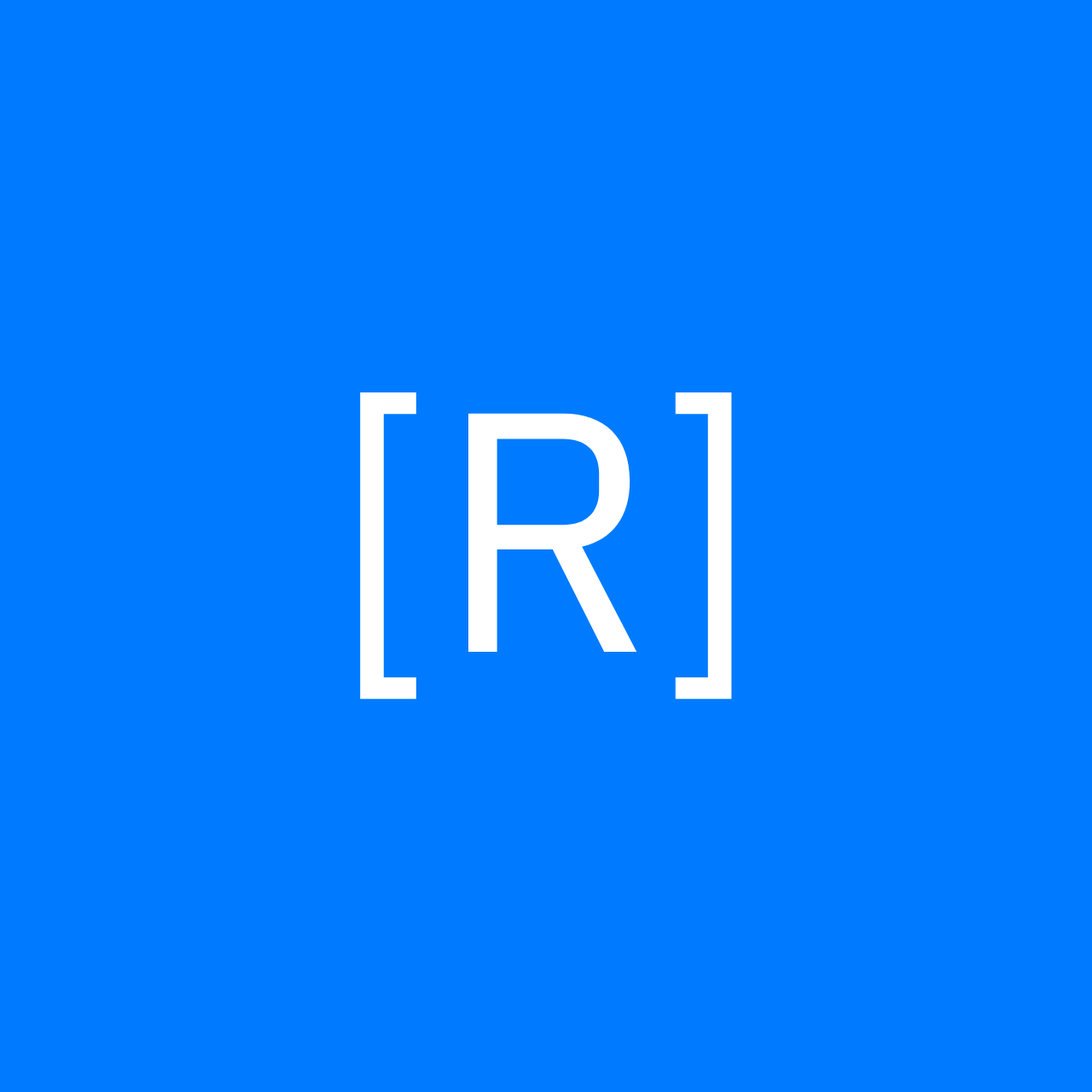
<style>
.page{position:relative;width:1092px;height:1092px;background:#007bff}
.page>*{position:absolute;margin:0}
.t1{font:341.2px "IBMPlexSans";color:#ffffff}
</style>
<div class="page">
<p class="t1" style="left:360px;top:392px;width:372px;height:308px">[R]</p>
</div>
